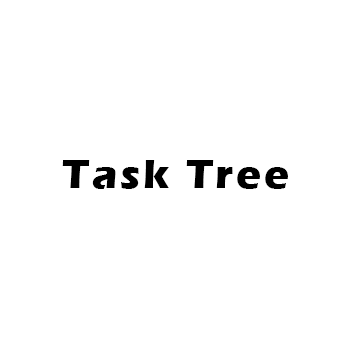
<style>
.page{position:relative;width:350px;height:350px;background:#ffffff}
.page>*{position:absolute;margin:0}
.t1{font:41.7px "ErasITC-Bold";letter-spacing:0.075em;color:#000000}
</style>
<div class="page">
<p class="t1" style="left:62px;top:160px;width:226px;height:29px">Task Tree</p>
</div>
